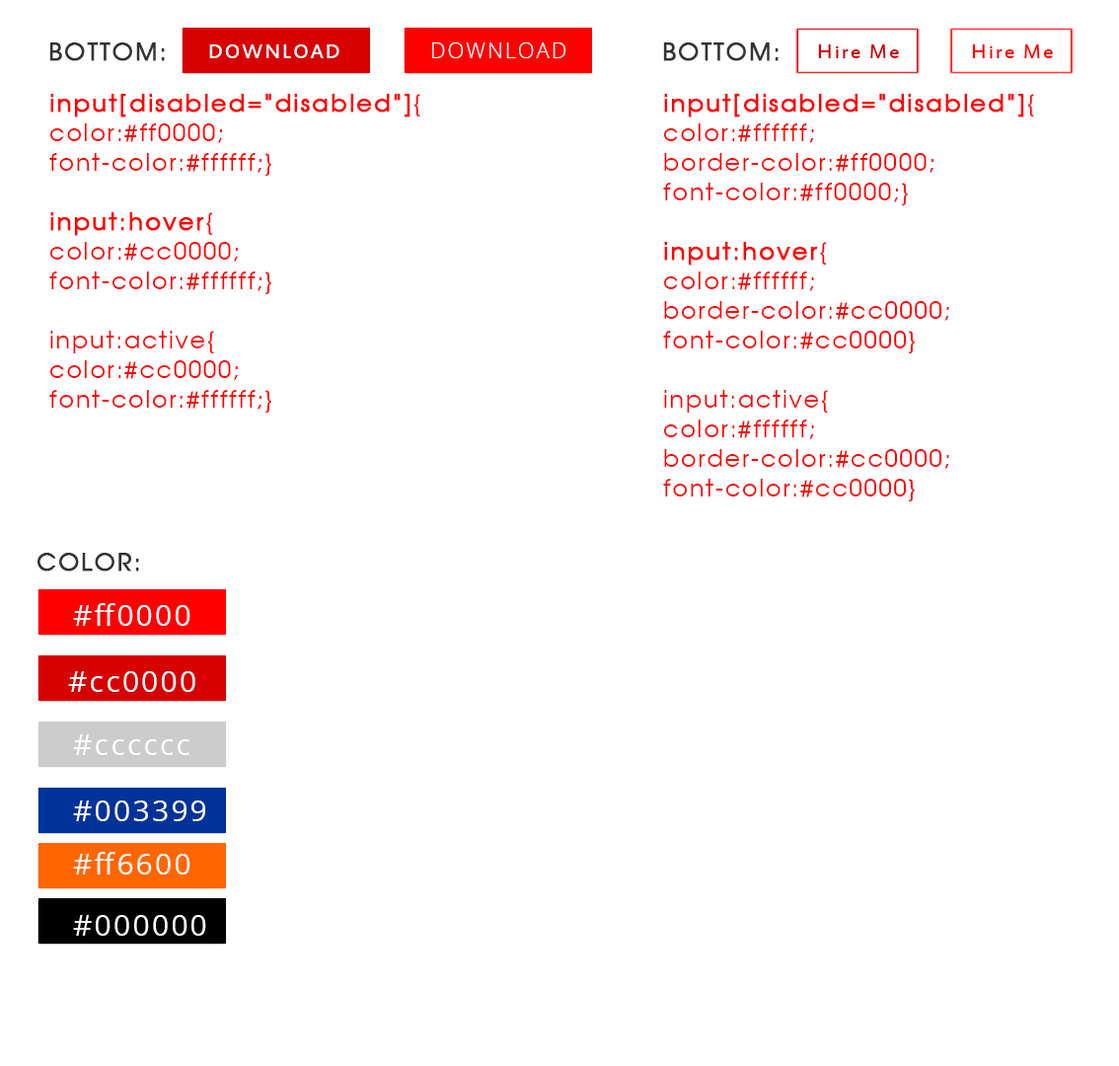
<style>
.page{position:relative;width:1119px;height:1066px;background:#ffffff}
.page>*{position:absolute;margin:0}
.t1{font:24.7px "Avanti";letter-spacing:0.075em;color:#333333;text-transform:uppercase;font-weight:bold}
.t2{font:22.1px "EstrangeloEdessa";letter-spacing:0.075em;color:#ffffff}
.t3{font:22.1px "OpenSans-Light";letter-spacing:0.075em;color:#ffffff}
.t4{font:22.1px "EstrangeloEdessa";letter-spacing:0.075em;color:#cc0000}
.t5{font:22.1px "EstrangeloEdessa";letter-spacing:0.075em;color:#ff0000}
.t6{font:24.7px "Avanti";letter-spacing:0.075em;color:#ff0000}
.t7{font:24.7px "Avanti";letter-spacing:0.075em;color:#ff0000;font-weight:bold}
.t8{font:29.6px "OpenSans";letter-spacing:0.075em;color:#ffffff}
</style>
<div class="page">
<p class="t1" style="left:49px;top:42px;width:116px;height:19px">Bottom:</p>
<p class="t2" style="left:209px;top:44px;width:130px;height:14px">DOWNLOAD</p>
<p class="t3" style="left:432px;top:42px;width:133px;height:16px">DOWNLOAD</p>
<p class="t1" style="left:663px;top:42px;width:116px;height:19px">Bottom:</p>
<p class="t4" style="left:818px;top:44px;width:81px;height:14px">Hire Me</p>
<p class="t5" style="left:972px;top:44px;width:81px;height:14px">Hire Me</p>
<p class="t6" style="left:49px;top:94px;width:371px;height:318px"><span class="t7">input[disabled="disabled"]</span>{<br>color:#ff0000;<br>font-color:#ffffff;}<br><br><span class="t7">input:hover</span>{<br>color:#cc0000;<br>font-color:#ffffff;}<br><br>input:active{<br>color:#cc0000;<br>font-color:#ffffff;}</p>
<p class="t6" style="left:663px;top:94px;width:371px;height:407px"><span class="t7">input[disabled="disabled"]</span>{<br>color:#ffffff;<br>border-color:#ff0000;<br>font-color:#ff0000;}<br><br><span class="t7">input:hover</span>{<br>color:#ffffff;<br>border-color:#cc0000;<br>font-color:#cc0000}<br><br>input:active{<br>color:#ffffff;<br>border-color:#cc0000;<br>font-color:#cc0000}</p>
<p class="t1" style="left:37px;top:553px;width:102px;height:18px">COLOR:</p>
<p class="t8" style="left:73px;top:603px;width:117px;height:23px">#ff0000</p>
<p class="t8" style="left:68px;top:671px;width:127px;height:21px">#cc0000</p>
<p class="t8" style="left:73px;top:734px;width:116px;height:21px">#cccccc</p>
<p class="t8" style="left:73px;top:800px;width:132px;height:21px">#003399</p>
<p class="t8" style="left:73px;top:852px;width:117px;height:22px">#ff6600</p>
<p class="t8" style="left:73px;top:915px;width:133px;height:20px">#000000</p>
</div>
